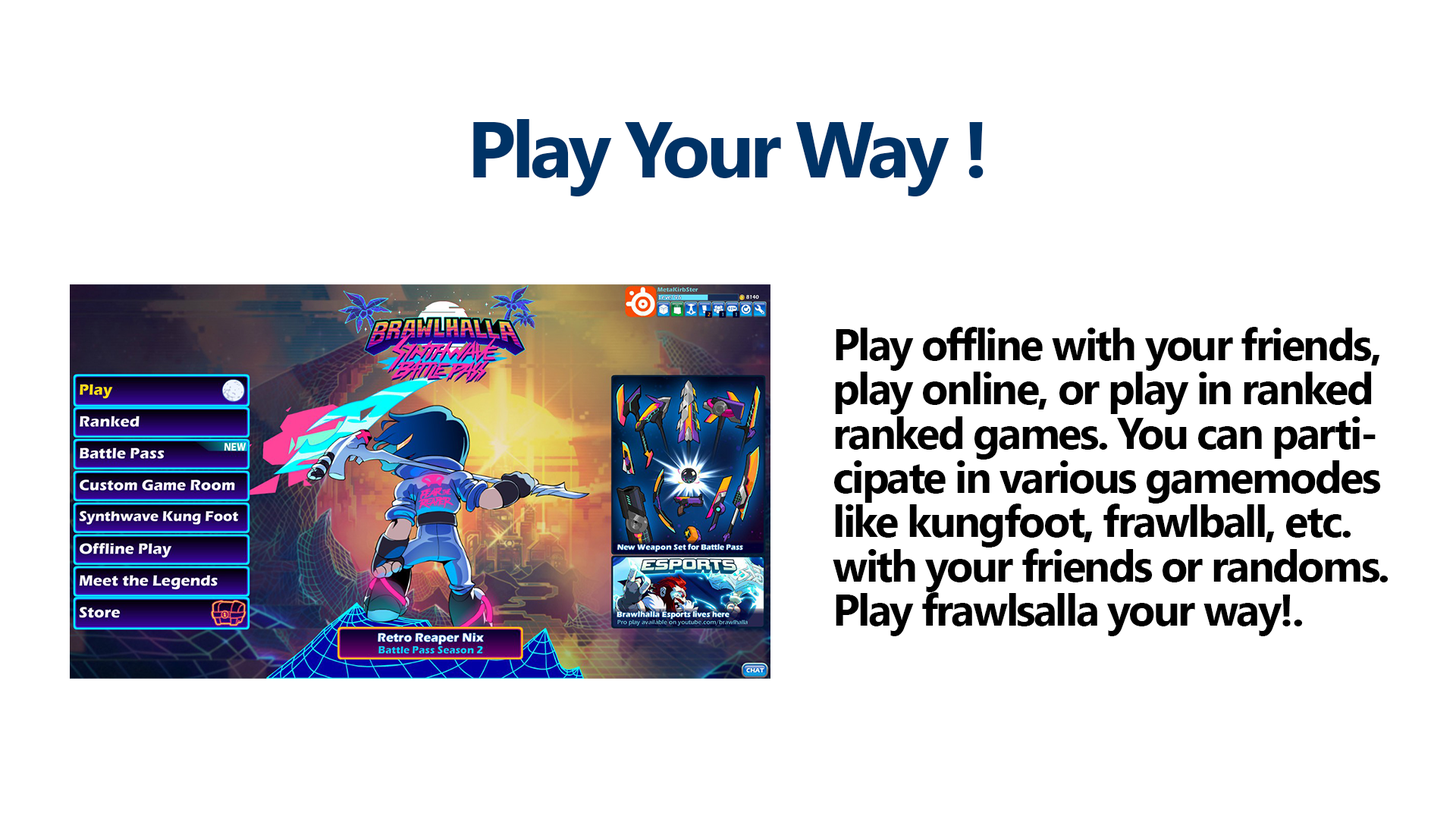
<style>
.page{position:relative;width:1456px;height:819px;background:#ffffff}
.page>*{position:absolute;margin:0}
.t1{font:79px "SegoeUI-Bold";letter-spacing:-0.05em;color:#003366}
.t2{font:44.2px/44.2px "SegoeUI-Bold";letter-spacing:-0.05em;color:#000000}
</style>
<div class="page">
<p class="t1" style="left:473px;top:119px;width:511px;height:77px">Play Your Way !</p>
<p class="t2" style="left:833px;top:327px;width:555px;height:309px">Play offline with your friends,<br>play online, or play in ranked <br>ranked games. You can parti-<br>cipate in various gamemodes<br>like kungfoot, frawlball, etc. <br>with your friends or randoms.<br>Play frawlsalla your way!.</p>
</div>
